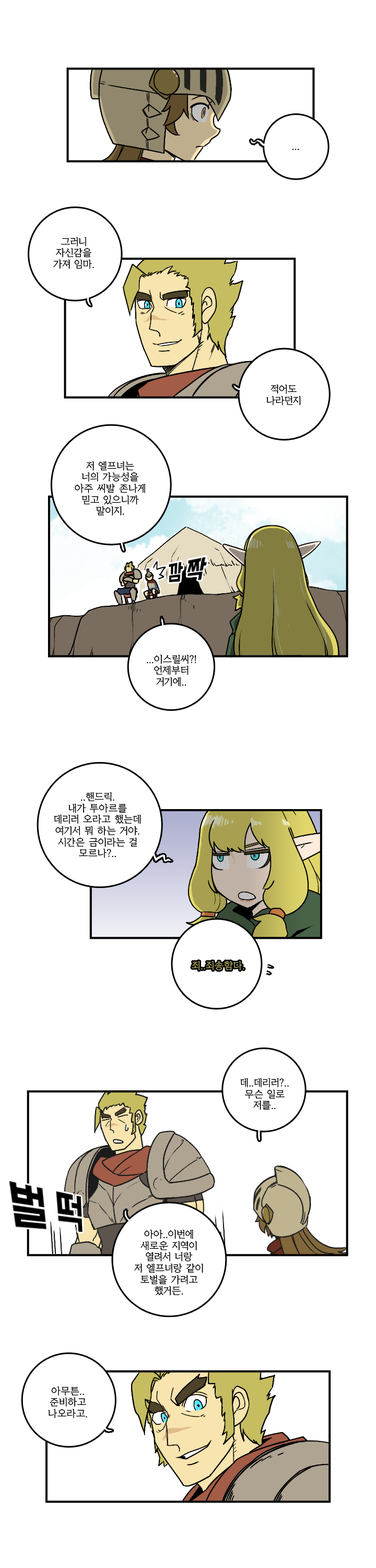
<style>
.page{position:relative;width:376px;height:1568px;background:#ffffff}
.page>*{position:absolute;margin:0}
.t1{font:9.4px "KoreanYMJ-B";color:#000000}
.t2{font:9.4px "KoreanYMJ-B";color:#c3ba66}
</style>
<div class="page">
<p class="t1" style="left:292px;top:148px;width:7px;height:2px">...</p>
<p class="t1" style="left:53px;top:237px;width:41px;height:32px;text-align:center">그러니<br>자신감을<br>가져 임마.</p>
<p class="t1" style="left:267px;top:384px;width:34px;height:22px;text-align:center">적어도<br>나라던지</p>
<p class="t1" style="left:75px;top:461px;width:70px;height:55px;text-align:center">저 엘프녀는<br>너의 가능성을<br>아주 씨발 존나게<br>믿고 있으니까<br>말이지.</p>
<p class="t1" style="left:147px;top:654px;width:50px;height:33px;text-align:center">...이스릴씨?!<br>언제부터<br>거기에..</p>
<p class="t1" style="left:54px;top:792px;width:87px;height:66px;text-align:center">..핸드릭.<br>내가 투아르를<br>데리러 오라고 했는데<br>여기서 뭐 하는 거야.<br>시간은 금이라는 걸<br>모르나?..</p>
<p class="t2" style="left:192px;top:961px;width:53px;height:10px">죄..죄송함다.</p>
<p class="t1" style="left:240px;top:1078px;width:49px;height:32px;text-align:center">데..데리러?..<br>무슨 일로<br>저를..</p>
<p class="t1" style="left:134px;top:1229px;width:69px;height:67px;text-align:center">아아..이번에<br>새로운 지역이<br>열려서 너랑<br>저 엘프녀랑 같이<br>토벌을 가려고<br>했거든.</p>
<p class="t1" style="left:48px;top:1386px;width:39px;height:33px;text-align:center">아무튼..<br>준비하고<br>나오라고.</p>
</div>
